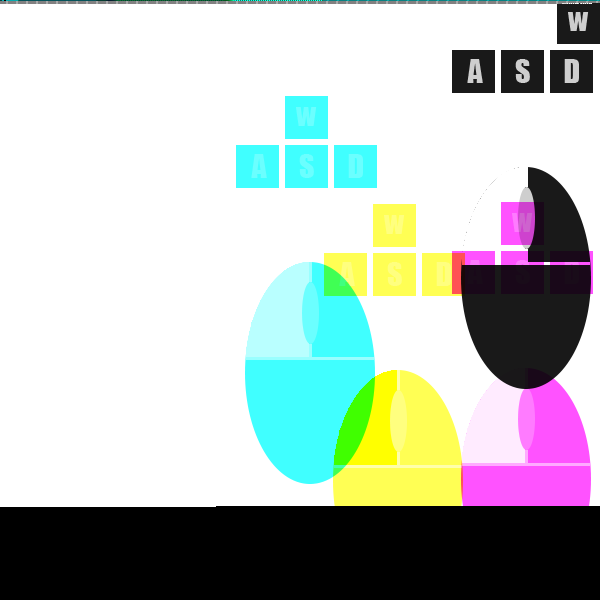
<style>
.page{position:relative;width:600px;height:600px;background:#ffffff}
.page>*{position:absolute;margin:0}
.t1{font:30px "Impact";color:#6bffff}
</style>
<div class="page">
<p class="t1" style="left:296px;top:106px;width:21px;height:19px">w</p>
<p class="t1" style="left:251px;top:153px;width:16px;height:24px">A</p>
<p class="t1" style="left:299px;top:153px;width:15px;height:24px">S</p>
<p class="t1" style="left:348px;top:153px;width:15px;height:24px">D</p>
</div>
